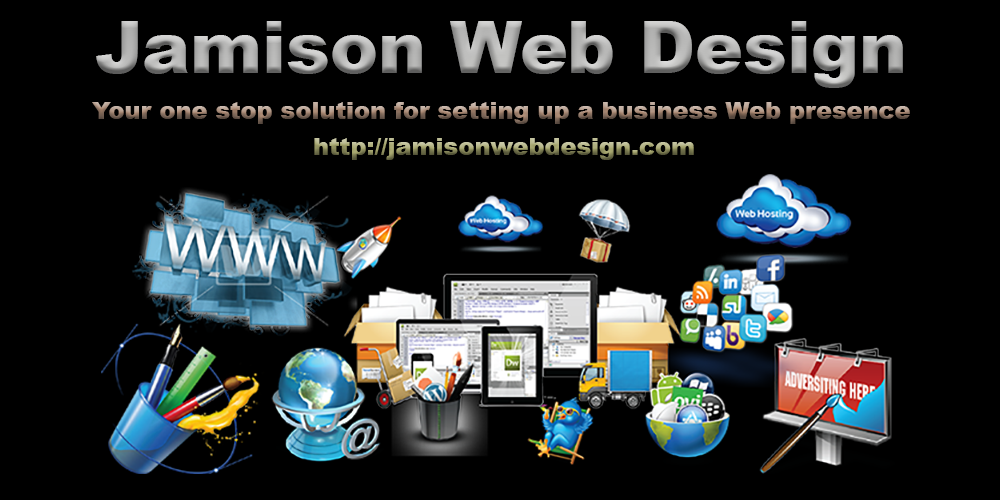
<style>
.page{position:relative;width:1000px;height:500px;background:#000000}
.page>*{position:absolute;margin:0}
.t1{font:72px "Arial-Black"}
.t2{font:24px "Arial-Black"}
</style>
<div class="page">
<p class="t1" style="left:96px;top:21px;width:807px;height:67px">Jamison Web Design</p>
<p class="t2" style="left:92px;top:102px;width:818px;height:22px">Your one stop solution for setting up a business Web presence</p>
<p class="t2" style="left:314px;top:138px;width:380px;height:22px">http://jamisonwebdesign.com</p>
</div>
